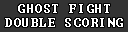
<style>
.page{position:relative;width:128px;height:32px;background:#333333}
.page>*{position:absolute;margin:0}
.t1{font:12px/14px "Terminal";letter-spacing:0.1em;color:#ffffff}
</style>
<div class="page">
<p class="t1" style="left:5px;top:4px;width:118px;height:23px;text-align:center">GHOST FIGHT<br>DOUBLE SCORING</p>
</div>
